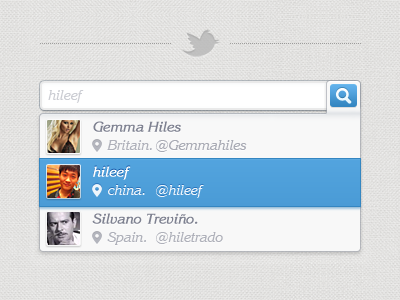
<style>
.page{position:relative;width:400px;height:300px}
.page>*{position:absolute;margin:0}
.t1{font:14px "KorinnaITCbyBT-KursivRegular";color:#cbcdd3}
.t2{font:14px "KorinnaITCbyBT-KursivRegular";color:#7e8190;font-weight:bold}
.t3{font:14px "KorinnaITCbyBT-KursivRegular";color:#afb1ba}
.t4{font:14px "KorinnaITCbyBT-KursivRegular";color:#a8aab3}
.t5{font:14px "KorinnaITCbyBT-KursivRegular";color:#ffffff;font-weight:bold}
.t6{font:14px "KorinnaITCbyBT-KursivRegular";color:#ffffff}
</style>
<div class="page">
<p class="t1" style="left:48px;top:90px;width:36px;height:13px">hileef</p>
<p class="t2" style="left:93px;top:121px;width:88px;height:11px">Gemma Hiles</p>
<p class="t3" style="left:107px;top:140px;width:45px;height:10px">Britain.</p>
<p class="t4" style="left:156px;top:140px;width:91px;height:12px">@Gemmahiles</p>
<p class="t5" style="left:93px;top:166px;width:38px;height:14px">hileef</p>
<p class="t6" style="left:108px;top:185px;width:37px;height:10px;opacity:0.9">china.</p>
<p class="t6" style="left:156px;top:185px;width:48px;height:13px;opacity:0.9">@hileef</p>
<p class="t2" style="left:92px;top:213px;width:106px;height:11px">Silvano Treviño.</p>
<p class="t3" style="left:107px;top:232px;width:39px;height:13px">Spain.</p>
<p class="t3" style="left:156px;top:232px;width:67px;height:12px">@hiletrado</p>
</div>
